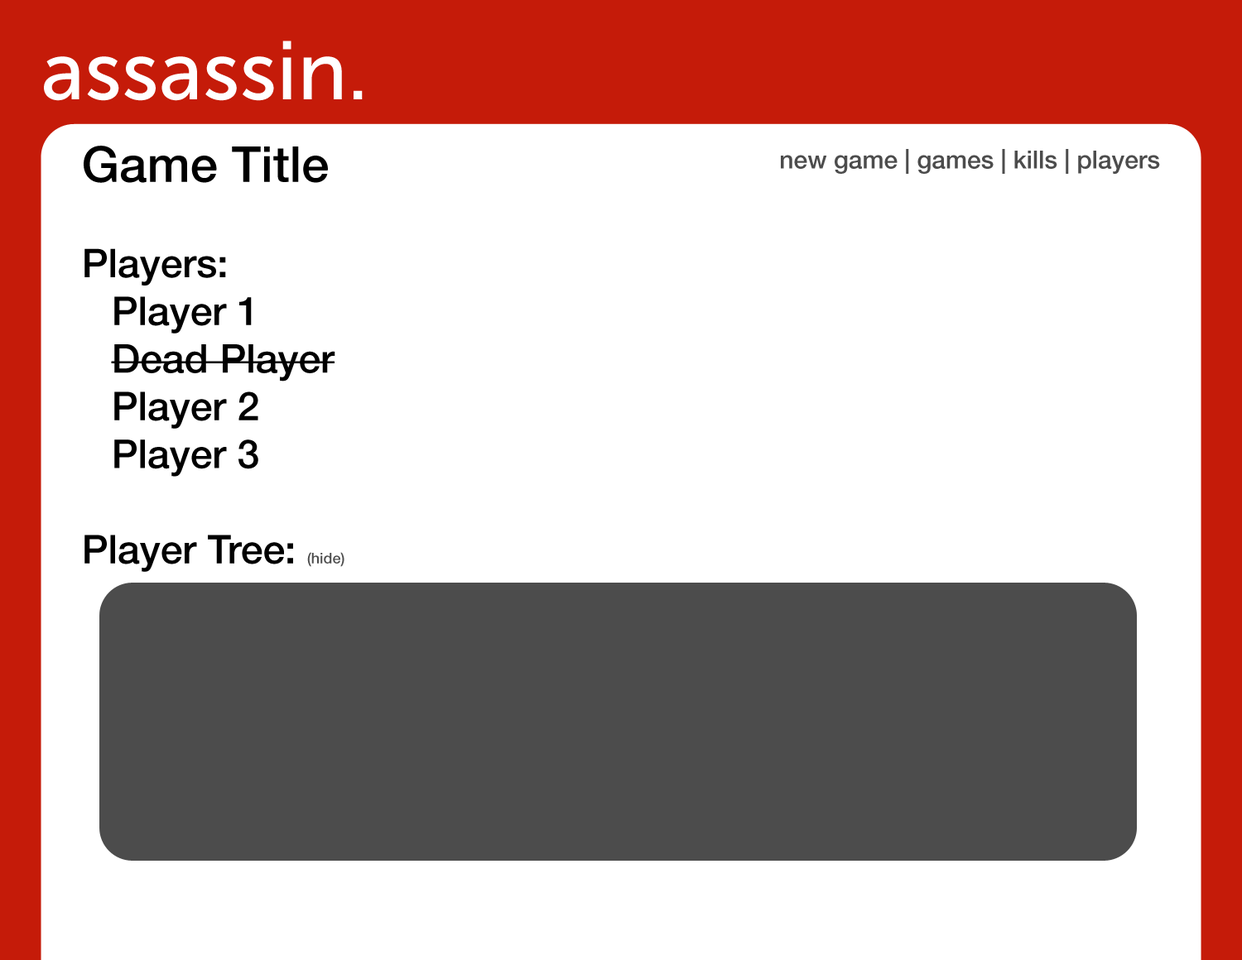
<style>
.page{position:relative;width:1242px;height:960px;background:#ffffff}
.page>*{position:absolute;margin:0}
.t1{font:82.8px "MuseoSans-500";color:#ffffff}
.t2{font:39.7px "HelveticaNeueLTStd-Md";color:#000000}
.t3{font:49.7px "HelveticaNeueLTStd-Md";color:#000000}
.t4{font:14.9px "HelveticaNeueLTStd-Md";color:#4c4c4c}
.t5{font:24.8px "HelveticaNeueLTStd-Md";color:#4c4c4c}
</style>
<div class="page">
<p class="t1" style="left:44px;top:41px;width:319px;height:60px">assassin.</p>
<p class="t2" style="left:84px;top:146px;width:260px;height:426px"><span class="t3">Game Title<br></span><br>Players:<br> Player 1<br> Dead Player<br> Player 2<br> Player 3<br><br>Player Tree: <span class="t4">(hide)</span></p>
<p class="t5" style="left:781px;top:149px;width:379px;height:25px">new game | games | kills | players</p>
</div>
